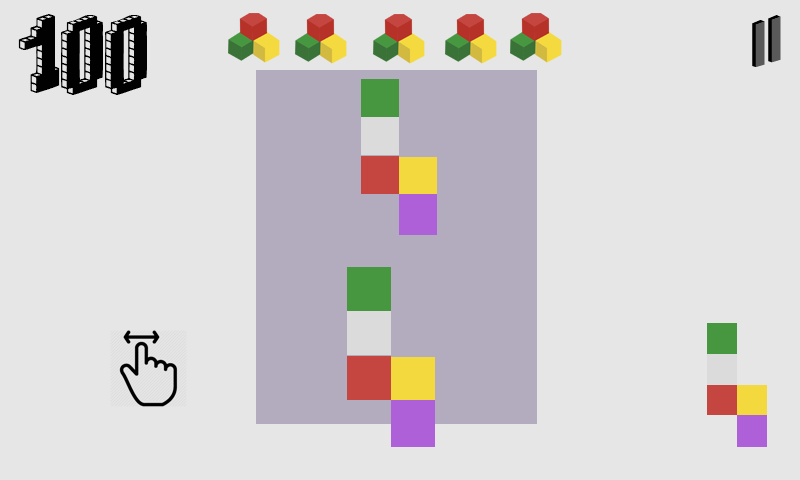
<style>
.page{position:relative;width:800px;height:480px;background:#e6e6e6}
.page>*{position:absolute;margin:0}
.t1{font:89px "Blox-(BRK";color:#010101}
</style>
<div class="page">
<p class="t1" style="left:18px;top:14px;width:129px;height:81px">100</p>
</div>
